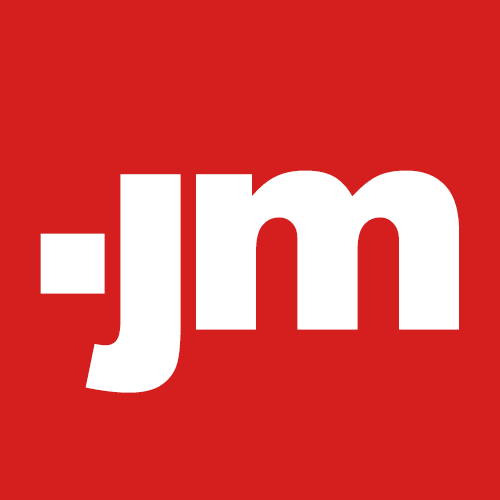
<style>
.page{position:relative;width:500px;height:500px;background:#d51f1f}
.page>*{position:absolute;margin:0}
.t1{font:298.8px "Arial-Black";letter-spacing:-0.1em;color:#ffffff;font-weight:bold}
</style>
<div class="page">
<p class="t1" style="left:40px;top:115px;width:419px;height:278px">.jm</p>
</div>
